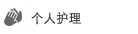
<style>
.page{position:relative;width:138px;height:34px;background:#ffffff}
.page>*{position:absolute;margin:0}
.t1{font:12.6px "STXihei";letter-spacing:0.05em;color:#343434;scale:0.95 1}
</style>
<div class="page">
<p class="t1" style="left:31px;top:12px;width:50px;height:13px">个人护理</p>
</div>
